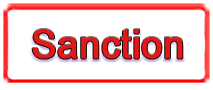
<style>
.page{position:relative;width:213px;height:90px;background:#ffffff}
.page>*{position:absolute;margin:0}
.t1{font:40.5px "ArialNarrow";color:#e41818;font-weight:bold;scale:1.11 1}
</style>
<div class="page">
<p class="t1" style="left:32px;top:29px;width:151px;height:30px">Sanction</p>
</div>
